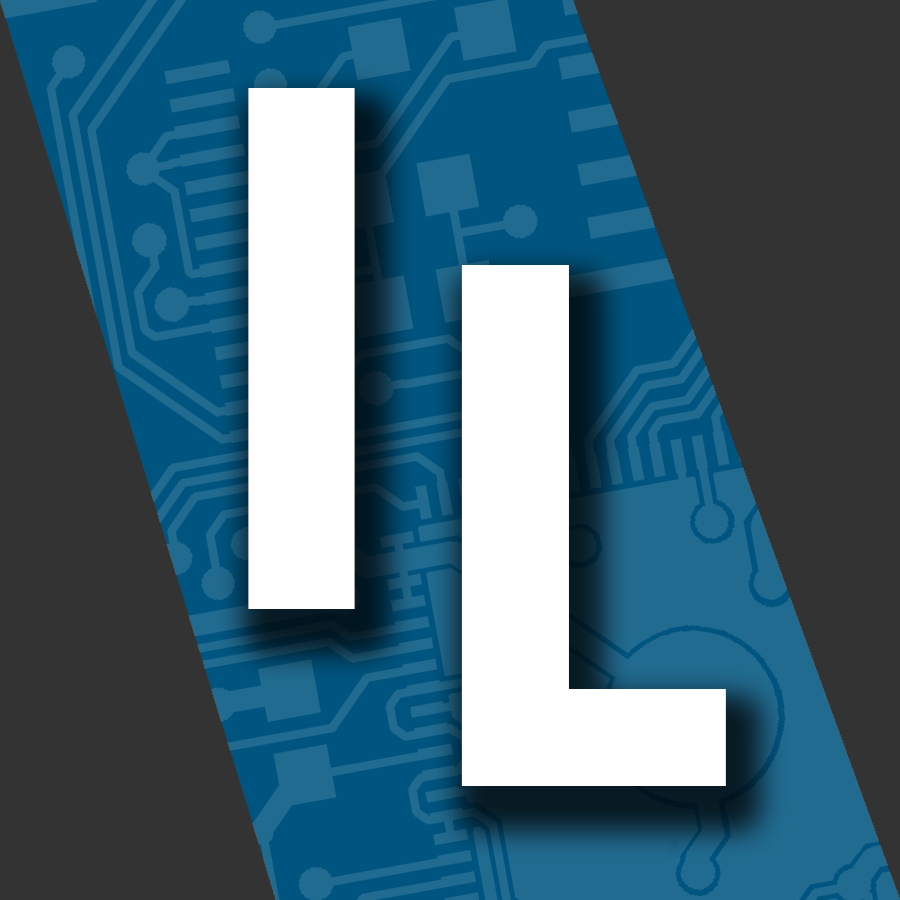
<style>
.page{position:relative;width:900px;height:900px;background:#333333}
.page>*{position:absolute;margin:0}
.t1{font:780.6px "FranklinGothic-DemiCond";color:#ffffff;scale:0.93 1}
.t2{font:780.6px "FranklinGothic-DemiCond";color:#ffffff;scale:0.94 1}
</style>
<div class="page">
<p class="t1" style="left:248px;top:88px;width:107px;height:521px">I</p>
<p class="t2" style="left:461px;top:265px;width:265px;height:521px">L</p>
</div>
